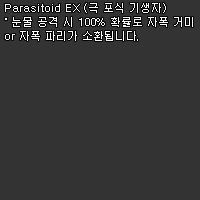
<style>
.page{position:relative;width:200px;height:200px;background:#333333}
.page>*{position:absolute;margin:0}
.t1{font:11px/14px "Dotum";color:#ffffff}
</style>
<div class="page">
<p class="t1" style="left:5px;top:3px;width:188px;height:38px">Parasitoid EX (극 포식 기생자)<br>˚ 눈물 공격 시 100% 확률로 자폭 거미<br>or 자폭 파리가 소환됩니다.</p>
</div>
